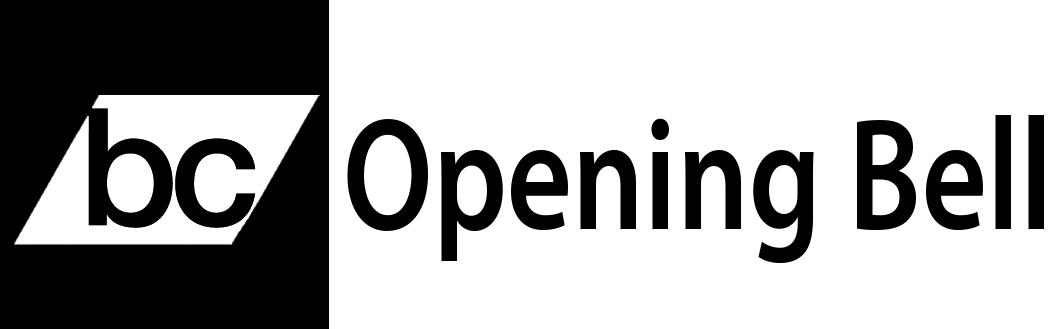
<style>
.page{position:relative;width:1056px;height:329px;background:#ffffff}
.page>*{position:absolute;margin:0}
.t1{font:160px "MyriadPro-Semibold";color:#000000;scale:0.79 1}
</style>
<div class="page">
<p class="t1" style="left:347px;top:115px;width:697px;height:148px">Opening Bell</p>
</div>
